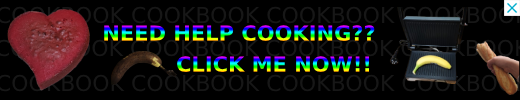
<style>
.page{position:relative;width:520px;height:100px;background:#000000}
.page>*{position:absolute;margin:0}
.t1{font:21px "MontserratRoman-ExtraBold"}
</style>
<div class="page">
<p class="t1" style="left:104px;top:25px;width:271px;height:17px">NEED HELP COOKING??</p>
<p class="t1" style="left:177px;top:56px;width:193px;height:17px">CLICK ME NOW!!</p>
</div>
